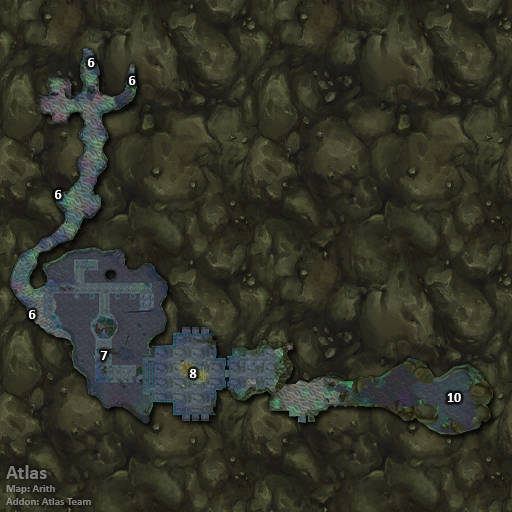
<style>
.page{position:relative;width:512px;height:512px}
.page>*{position:absolute;margin:0}
.t1{font:14px "Calibri-Bold";color:#ffffff}
.t2{font:11px "Calibri-Bold";color:#7f7f7c}
.t3{font:20px "Calibri-Bold";color:#7f7f7c}
</style>
<div class="page">
<p class="t1" style="left:88px;top:58px;width:7px;height:9px">6</p>
<p class="t1" style="left:129px;top:76px;width:7px;height:9px">6</p>
<p class="t1" style="left:55px;top:190px;width:7px;height:9px">6</p>
<p class="t1" style="left:29px;top:310px;width:7px;height:9px">6</p>
<p class="t1" style="left:100px;top:351px;width:8px;height:9px">7</p>
<p class="t1" style="left:189px;top:369px;width:8px;height:9px">8</p>
<p class="t1" style="left:447px;top:393px;width:14px;height:9px">10</p>
<p class="t2" style="left:6px;top:465px;width:85px;height:40px"><span class="t3">Atlas<br></span>Map: Arith<br>Addon: Atlas Team</p>
</div>
